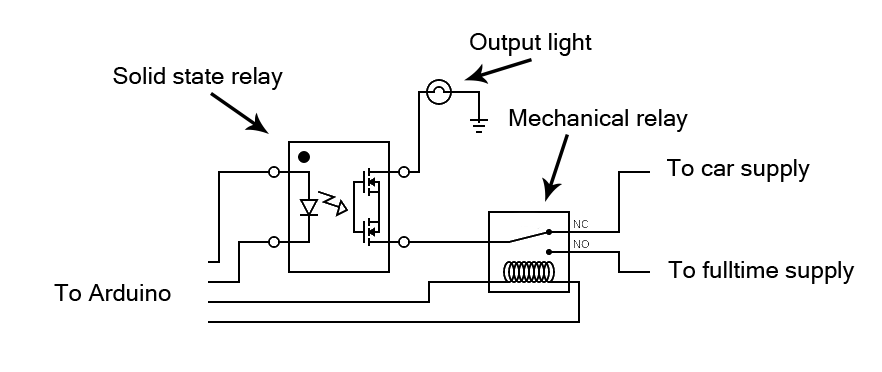
<style>
.page{position:relative;width:882px;height:372px;background:#ffffff}
.page>*{position:absolute;margin:0}
.t1{font:24px "MicrosoftSansSerif";color:#000000}
</style>
<div class="page">
<p class="t1" style="left:470px;top:33px;width:122px;height:23px">Output light</p>
<p class="t1" style="left:113px;top:67px;width:170px;height:23px">Solid state relay</p>
<p class="t1" style="left:509px;top:109px;width:179px;height:23px">Mechanical relay</p>
<p class="t1" style="left:667px;top:159px;width:143px;height:23px">To car supply</p>
<p class="t1" style="left:668px;top:261px;width:187px;height:23px">To fulltime supply</p>
<p class="t1" style="left:54px;top:284px;width:117px;height:17px">To Arduino</p>
</div>
